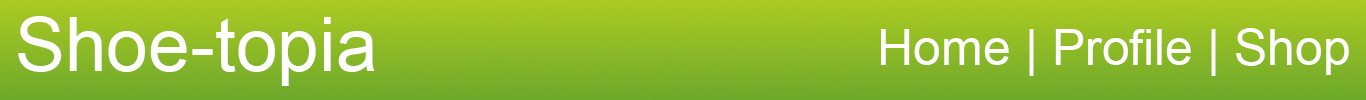
<style>
.page{position:relative;width:1366px;height:100px}
.page>*{position:absolute;margin:0}
.t1{font:75px "ArialMT";color:#ffffff}
.t2{font:50px "ArialMT";color:#ffffff}
</style>
<div class="page">
<p class="t1" style="left:18px;top:16px;width:357px;height:70px">Shoe-topia</p>
<p class="t2" style="left:881px;top:28px;width:468px;height:48px">Home | Profile | Shop</p>
</div>
